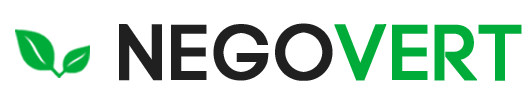
<style>
.page{position:relative;width:528px;height:108px;background:#ffffff}
.page>*{position:absolute;margin:0}
.t1{font:78.3px "Code-Bold";letter-spacing:0.05em;color:#202020;text-transform:uppercase;font-weight:bold}
.t2{font:78.3px "Code-Bold";letter-spacing:0.05em;color:#00ac39;text-transform:uppercase;font-weight:bold}
</style>
<div class="page">
<p class="t1" style="left:119px;top:23px;width:403px;height:58px">Nego<span class="t2">Vert</span></p>
</div>
